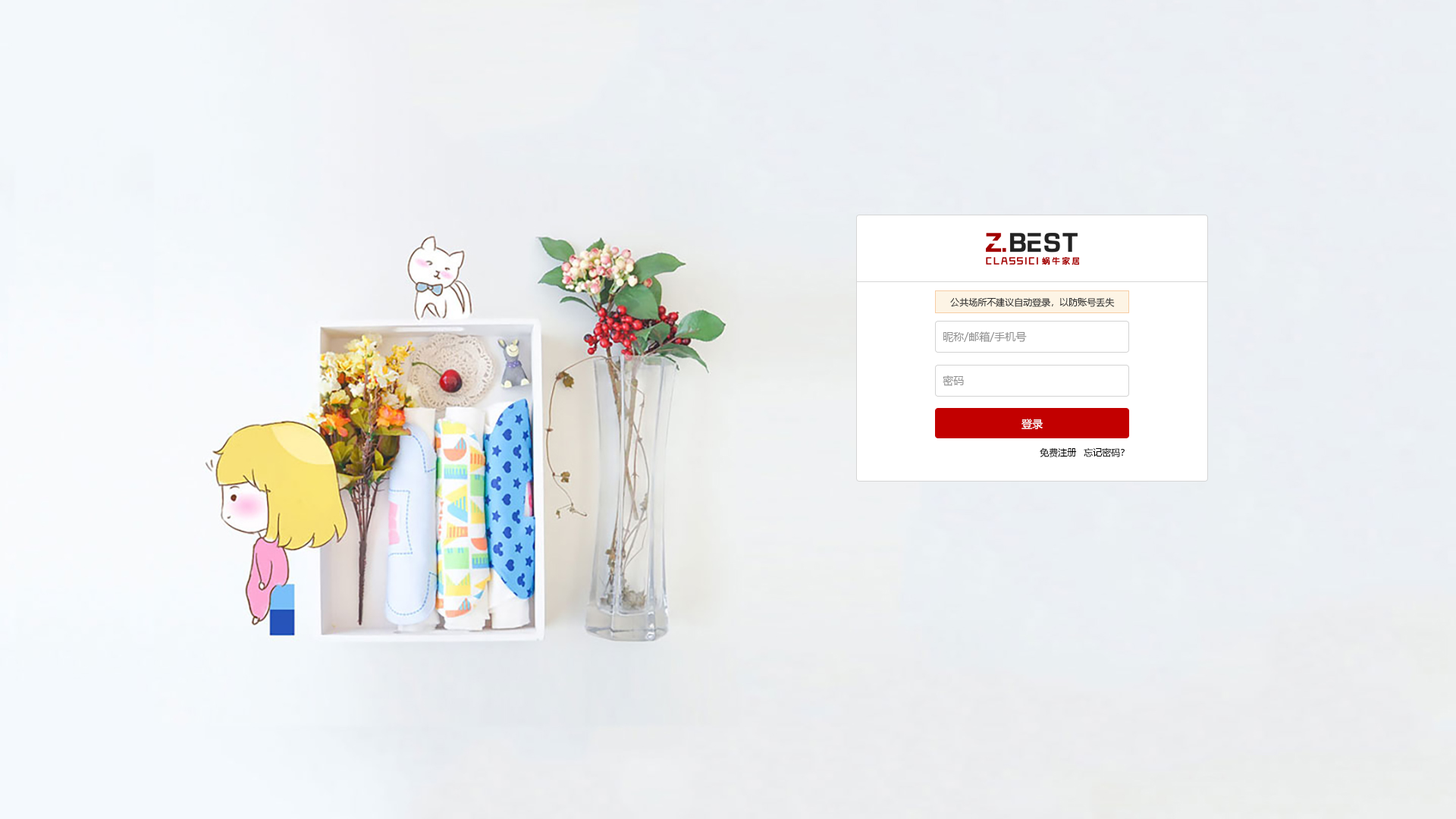
<style>
.page{position:relative;width:1456px;height:819px}
.page>*{position:absolute;margin:0}
.t1{font:9.1px "MicrosoftYaHei";color:#333333}
.t2{font:10.6px "MicrosoftYaHei";color:#929292}
.t3{font:10.6px "MicrosoftYaHei";color:#ffffff}
.t4{font:9.1px "MicrosoftYaHei";color:#000000}
</style>
<div class="page">
<p class="t1" style="left:950px;top:297px;width:165px;height:10px">公共场所不建议自动登录，以防账号丢失</p>
<p class="t2" style="left:943px;top:331px;width:84px;height:11px">昵称/邮箱/手机号</p>
<p class="t2" style="left:943px;top:375px;width:21px;height:11px">密码</p>
<p class="t3" style="left:1021px;top:419px;width:22px;height:10px">登录</p>
<p class="t4" style="left:1040px;top:447px;width:37px;height:10px">免费注册</p>
<p class="t4" style="left:1084px;top:448px;width:41px;height:9px">忘记密码？</p>
</div>
